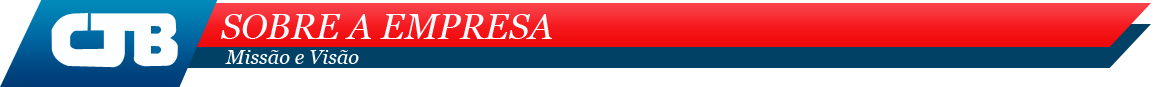
<style>
.page{position:relative;width:1175px;height:87px;background:#ffffff}
.page>*{position:absolute;margin:0}
.t1{font:36px "Georgia-Italic";color:#fafbfc}
.t2{font:20px "Georgia-Italic";color:#fcfeff}
</style>
<div class="page">
<p class="t1" style="left:221px;top:14px;width:332px;height:25px">SOBRE A EMPRESA</p>
<p class="t2" style="left:225px;top:50px;width:134px;height:14px">Missão e Visão</p>
</div>
